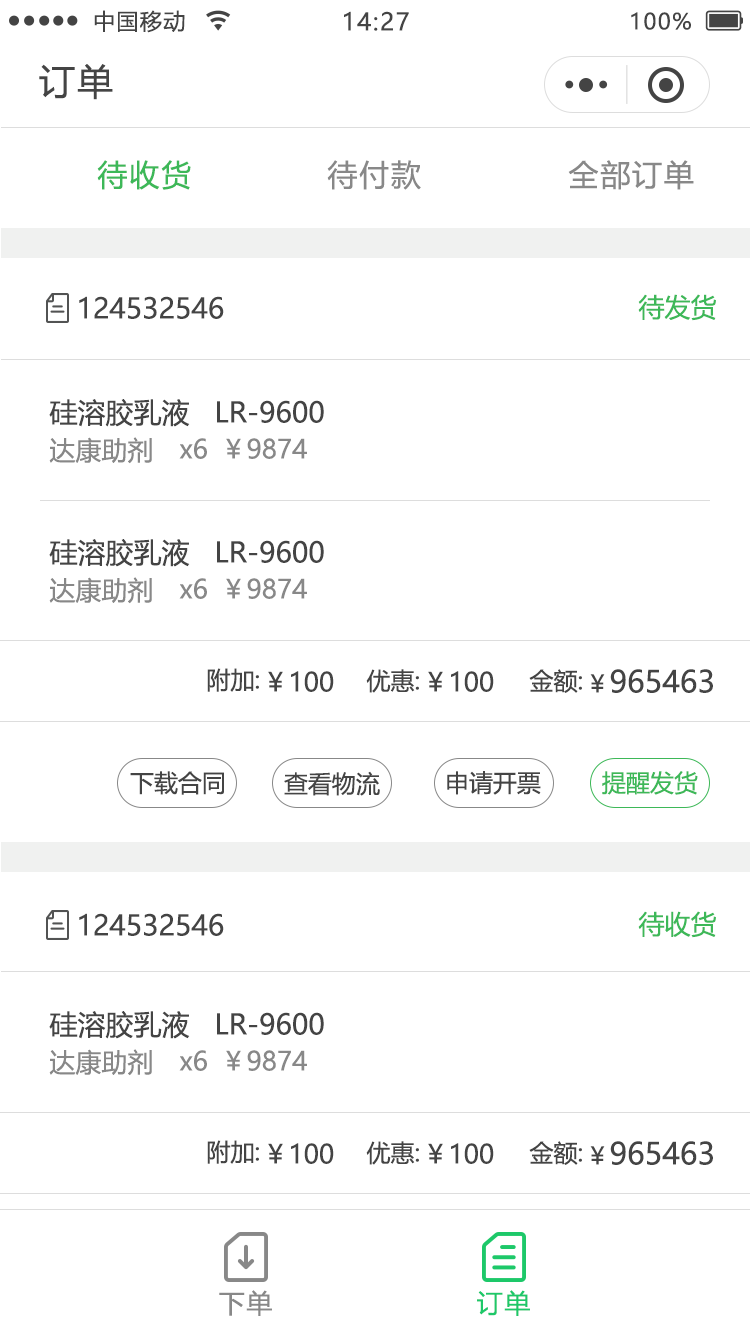
<style>
.page{position:relative;width:750px;height:1334px;background:#ffffff}
.page>*{position:absolute;margin:0}
.t1{font:22px "MicrosoftYaHeiUI";letter-spacing:0.06em;color:#444444}
.t2{font:24px "MicrosoftYaHeiUI";letter-spacing:0.06em;color:#444444}
.t3{font:36px "MicrosoftYaHeiUI";letter-spacing:0.06em;color:#444444}
.t4{font:30px "MicrosoftYaHeiUI";letter-spacing:0.06em;color:#3db858}
.t5{font:30px "MicrosoftYaHeiUI";letter-spacing:0.06em;color:#888888}
.t6{font:26px "MicrosoftYaHeiUI";color:#3db858}
.t7{font:28px "MicrosoftYaHeiUI";color:#444444}
.t8{font:26px "MicrosoftYaHeiUI";color:#888888}
.t9{font:24px "MicrosoftYaHeiUI";color:#444444}
.t10{font:26px "MicrosoftYaHeiUI";color:#444444}
.t11{font:30px "MicrosoftYaHeiUI";color:#444444}
.t12{font:24px "MicrosoftYaHeiUI";color:#3db858}
.t13{font:26px "MicrosoftYaHeiUI";letter-spacing:0.06em;color:#888888}
.t14{font:26px "MicrosoftYaHeiUI";letter-spacing:0.06em;color:#1dc869}
</style>
<div class="page">
<p class="t1" style="left:94px;top:10px;width:91px;height:23px">中国移动</p>
<p class="t2" style="left:344px;top:11px;width:65px;height:20px">14:27</p>
<p class="t1" style="left:631px;top:12px;width:60px;height:18px">100%</p>
<p class="t3" style="left:39px;top:64px;width:74px;height:36px">订单</p>
<p class="t4" style="left:97px;top:160px;width:94px;height:30px">待收货</p>
<p class="t5" style="left:327px;top:160px;width:94px;height:30px">待付款</p>
<p class="t5" style="left:568px;top:160px;width:126px;height:30px">全部订单</p>
<p class="t6" style="left:638px;top:294px;width:78px;height:27px">待发货</p>
<p class="t7" style="left:79px;top:296px;width:145px;height:23px">124532546</p>
<p class="t7" style="left:49px;top:399px;width:275px;height:28px">硅溶胶乳液   LR-9600</p>
<p class="t8" style="left:49px;top:437px;width:103px;height:27px">达康助剂</p>
<p class="t8" style="left:179px;top:438px;width:28px;height:21px">x6</p>
<p class="t8" style="left:226px;top:438px;width:81px;height:21px">￥9874</p>
<p class="t7" style="left:49px;top:539px;width:275px;height:28px">硅溶胶乳液   LR-9600</p>
<p class="t8" style="left:49px;top:577px;width:103px;height:27px">达康助剂</p>
<p class="t8" style="left:179px;top:578px;width:28px;height:21px">x6</p>
<p class="t8" style="left:226px;top:578px;width:81px;height:21px">￥9874</p>
<p class="t9" style="left:207px;top:668px;width:52px;height:24px">附加:</p>
<p class="t10" style="left:268px;top:671px;width:66px;height:21px">￥100</p>
<p class="t9" style="left:366px;top:669px;width:53px;height:24px">优惠:</p>
<p class="t10" style="left:428px;top:671px;width:66px;height:21px">￥100</p>
<p class="t9" style="left:529px;top:669px;width:53px;height:24px">金额:</p>
<p class="t11" style="left:590px;top:669px;width:123px;height:24px"><span class="t9">￥</span>965463</p>
<p class="t9" style="left:130px;top:771px;width:94px;height:24px">下载合同</p>
<p class="t9" style="left:284px;top:771px;width:96px;height:25px">查看物流</p>
<p class="t9" style="left:447px;top:771px;width:94px;height:24px">申请开票</p>
<p class="t12" style="left:602px;top:771px;width:96px;height:24px">提醒发货</p>
<p class="t7" style="left:79px;top:913px;width:145px;height:23px">124532546</p>
<p class="t6" style="left:638px;top:911px;width:78px;height:27px">待收货</p>
<p class="t7" style="left:49px;top:1011px;width:275px;height:28px">硅溶胶乳液   LR-9600</p>
<p class="t8" style="left:49px;top:1049px;width:103px;height:27px">达康助剂</p>
<p class="t8" style="left:179px;top:1050px;width:28px;height:21px">x6</p>
<p class="t8" style="left:226px;top:1050px;width:81px;height:21px">￥9874</p>
<p class="t9" style="left:207px;top:1140px;width:52px;height:24px">附加:</p>
<p class="t10" style="left:268px;top:1143px;width:66px;height:21px">￥100</p>
<p class="t9" style="left:366px;top:1141px;width:53px;height:24px">优惠:</p>
<p class="t10" style="left:428px;top:1143px;width:66px;height:21px">￥100</p>
<p class="t9" style="left:529px;top:1141px;width:53px;height:24px">金额:</p>
<p class="t11" style="left:590px;top:1141px;width:123px;height:24px"><span class="t9">￥</span>965463</p>
<p class="t13" style="left:219px;top:1290px;width:53px;height:26px">下单</p>
<p class="t14" style="left:477px;top:1290px;width:53px;height:26px">订单</p>
</div>
